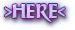
<style>
.page{position:relative;width:75px;height:30px}
.page>*{position:absolute;margin:0}
.t1{font:20px "LHFUncialCaps";color:#c3c5f7;font-variant:small-caps}
</style>
<div class="page">
<p class="t1" style="left:4px;top:4px;width:61px;height:18px">&gt;HERE&lt;</p>
</div>
